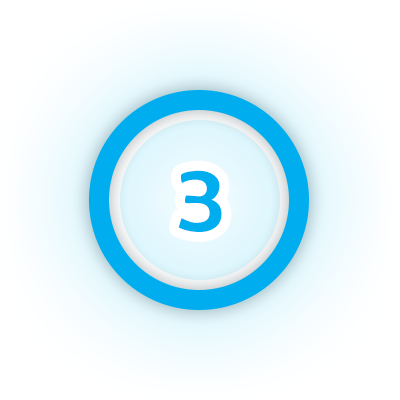
<style>
.page{position:relative;width:400px;height:400px}
.page>*{position:absolute;margin:0}
.t1{font:100px "BerlinSansFB-Reg";color:#00aeef}
</style>
<div class="page">
<p class="t1" style="left:178px;top:170px;width:44px;height:62px">3</p>
</div>
